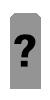
<style>
.page{position:relative;width:50px;height:100px;background:#ffffff}
.page>*{position:absolute;margin:0}
.t1{font:37px "HeadlineR-HM";color:#000000}
</style>
<div class="page">
<p class="t1" style="left:14px;top:34px;width:22px;height:33px">?</p>
</div>
